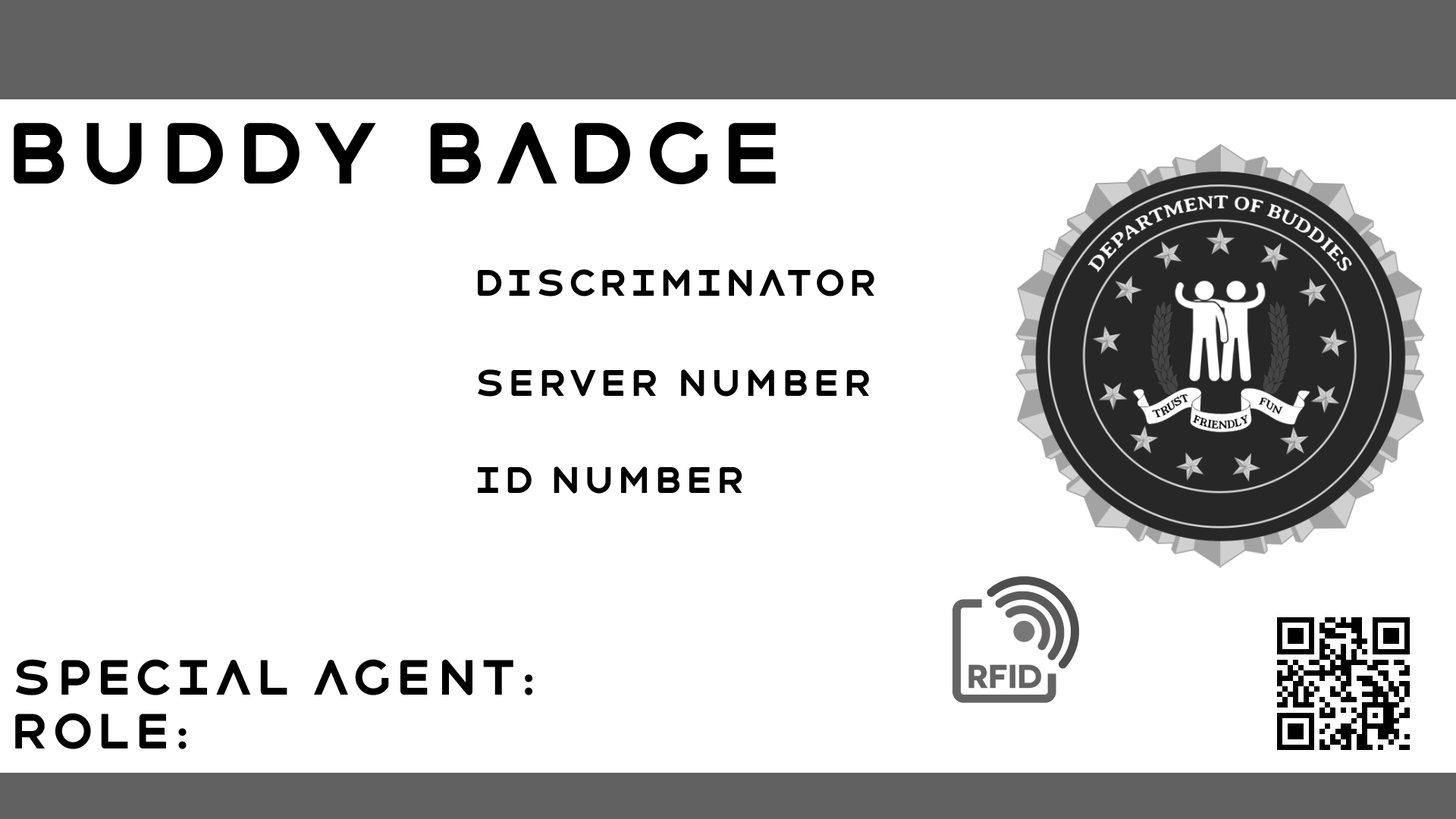
<style>
.page{position:relative;width:1456px;height:819px;background:#ffffff}
.page>*{position:absolute;margin:0}
.t1{font:87.1px "HavelockTitling-Bold";color:#000000}
.t2{font:37.2px "HavelockTitling-Bold";color:#000000}
.t3{font:49.7px "HavelockTitling-Bold";color:#000000}
</style>
<div class="page">
<p class="t1" style="left:14px;top:121px;width:762px;height:64px">Buddy Badge</p>
<p class="t2" style="left:478px;top:269px;width:396px;height:28px">DISCRIMINATOR</p>
<p class="t2" style="left:478px;top:369px;width:392px;height:28px">SERVER Number</p>
<p class="t2" style="left:478px;top:466px;width:264px;height:28px">ID Number</p>
<p class="t3" style="left:15px;top:659px;width:518px;height:36px">Special Agent:</p>
<p class="t3" style="left:15px;top:713px;width:172px;height:36px">Role:</p>
</div>
